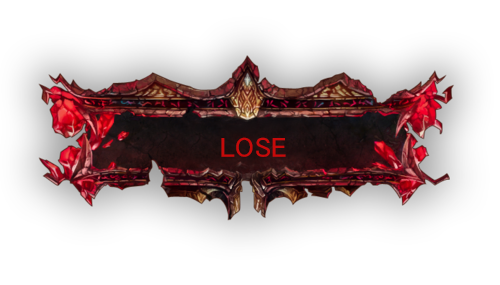
<style>
.page{position:relative;width:500px;height:285px;background:#ffffff}
.page>*{position:absolute;margin:0}
.t1{font:28px "MS-PGothic";color:#c60a0a}
</style>
<div class="page">
<p class="t1" style="left:221px;top:137px;width:65px;height:20px">LOSE</p>
</div>
